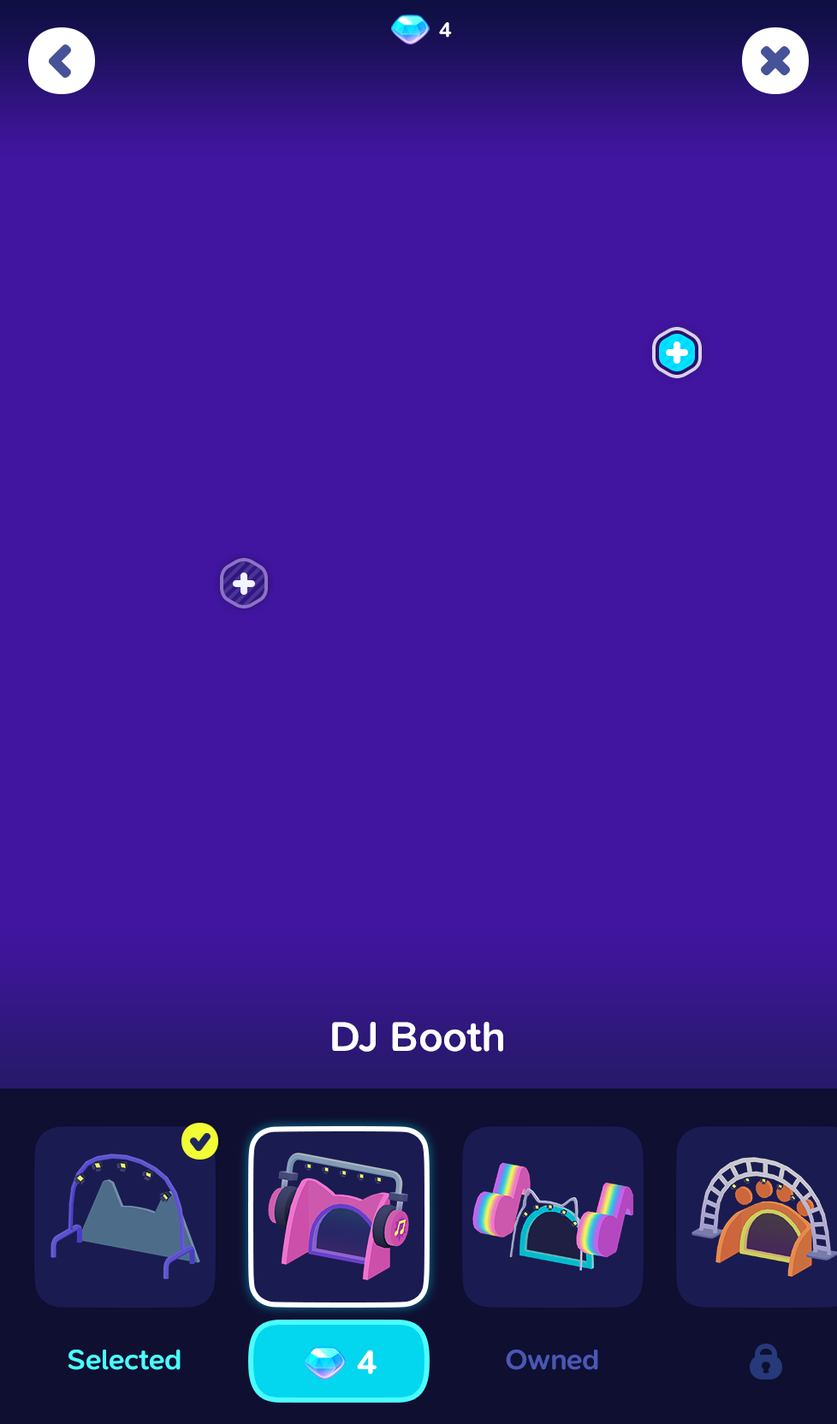
<style>
.page{position:relative;width:837px;height:1424px;background:#4115a0}
.page>*{position:absolute;margin:0}
.t1{font:21.4px "SNPro-SemiBold";letter-spacing:-0.01em;color:#ffffff}
.t2{font:42.8px "SNPro-SemiBold";letter-spacing:-0.01em;color:#ffffff}
.t3{font:29.1px "SNPro-SemiBold";letter-spacing:-0.01em;color:#4afdff}
.t4{font:29.1px "SNPro-SemiBold";letter-spacing:-0.01em;color:#4a57b5}
.t5{font:34.2px "SNPro-SemiBold";letter-spacing:-0.01em;color:#ffffff;text-transform:uppercase}
</style>
<div class="page">
<p class="t1" style="left:439px;top:22px;width:13px;height:16px">4</p>
<p class="t2" style="left:332px;top:1022px;width:171px;height:30px">DJ Booth</p>
<p class="t3" style="left:68px;top:1350px;width:113px;height:20px">Selected</p>
<p class="t4" style="left:506px;top:1350px;width:92px;height:20px">Owned</p>
<p class="t5" style="left:357px;top:1351px;width:20px;height:24px">4</p>
</div>
